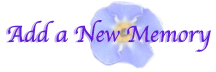
<style>
.page{position:relative;width:216px;height:72px;background:#ffffff}
.page>*{position:absolute;margin:0}
.t1{font:24px "Apple-Chancery";color:#c9b2f5}
.t2{font:24px "Apple-Chancery";color:#5f21d2}
</style>
<div class="page">
<p class="t1" style="left:6px;top:20px;width:203px;height:32px">Add a New Memory</p>
<p class="t2" style="left:8px;top:20px;width:203px;height:32px">Add a New Memory</p>
</div>
